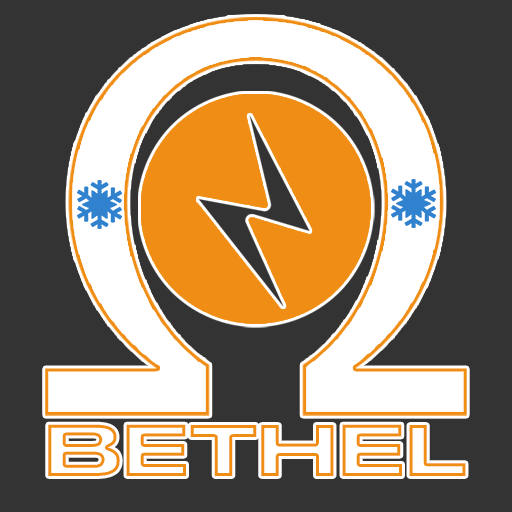
<style>
.page{position:relative;width:512px;height:512px;background:#333333}
.page>*{position:absolute;margin:0}
.t1{font:73px "StretchProRegular";text-transform:uppercase}
</style>
<div class="page">
<p class="t1" style="left:48px;top:424px;width:418px;height:52px">bethel</p>
</div>
